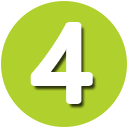
<style>
.page{position:relative;width:128px;height:128px;background:#b0d02e}
.page>*{position:absolute;margin:0}
.t1{font:100px "MicrosoftYaHei";color:#ffffff}
</style>
<div class="page">
<p class="t1" style="left:33px;top:25px;width:57px;height:76px">4</p>
</div>
